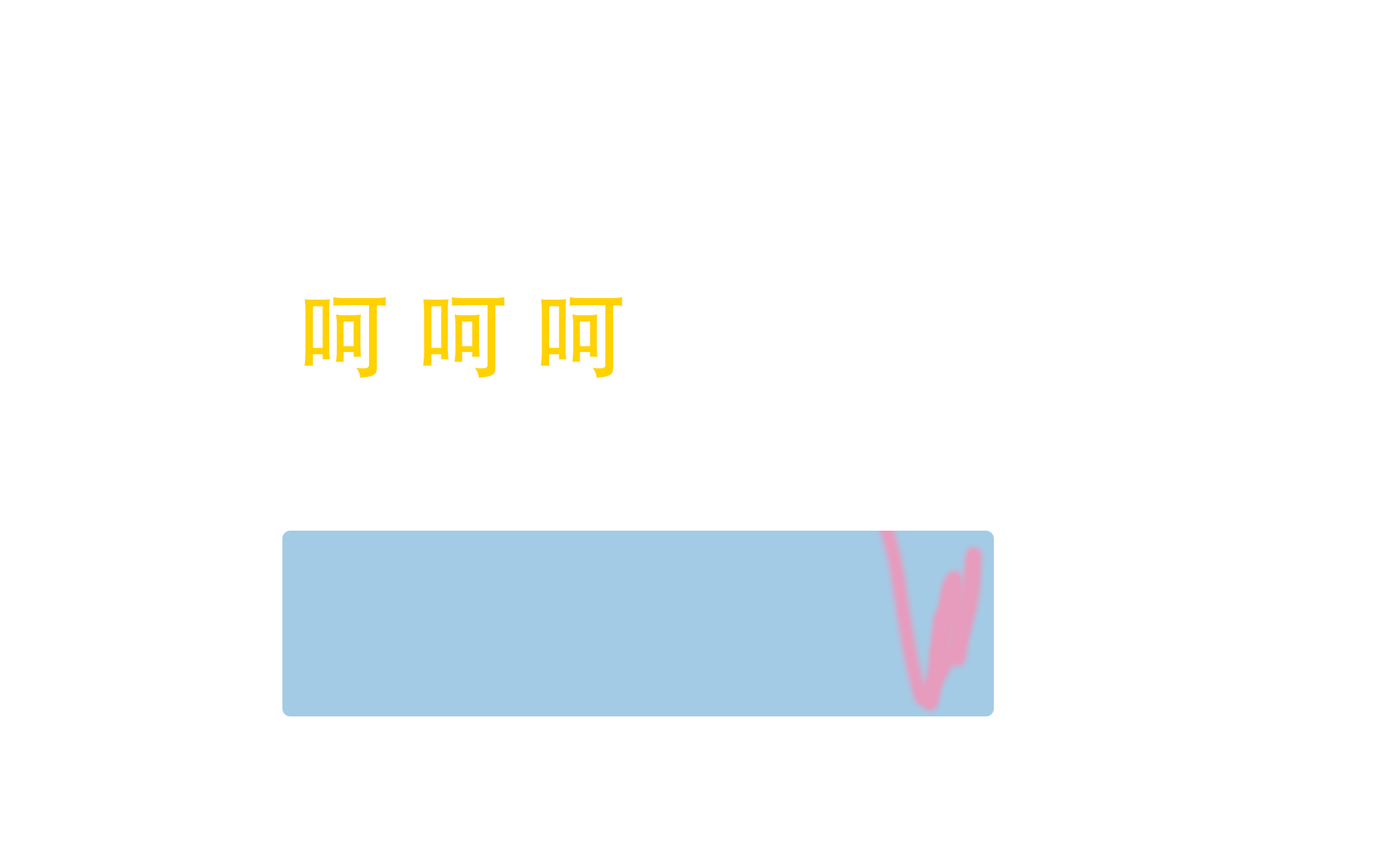
<style>
.page{position:relative;width:1387px;height:860px;background:#ffffff}
.page>*{position:absolute;margin:0}
.t1{font:93.6px "AdobeHeitiStd-Regular";letter-spacing:0.26em;color:#ffd200;text-transform:uppercase}
</style>
<div class="page">
<p class="t1" style="left:304px;top:296px;width:319px;height:82px">呵呵呵</p>
</div>
